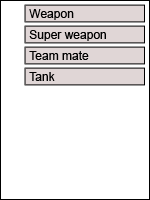
<style>
.page{position:relative;width:150px;height:200px;background:#ffffff}
.page>*{position:absolute;margin:0}
.t1{font:12px "ArialMT";color:#000000}
</style>
<div class="page">
<p class="t1" style="left:29px;top:9px;width:45px;height:11px">Weapon</p>
<p class="t1" style="left:29px;top:30px;width:77px;height:11px">Super weapon</p>
<p class="t1" style="left:29px;top:51px;width:60px;height:9px">Team mate</p>
<p class="t1" style="left:29px;top:72px;width:26px;height:9px">Tank</p>
</div>
